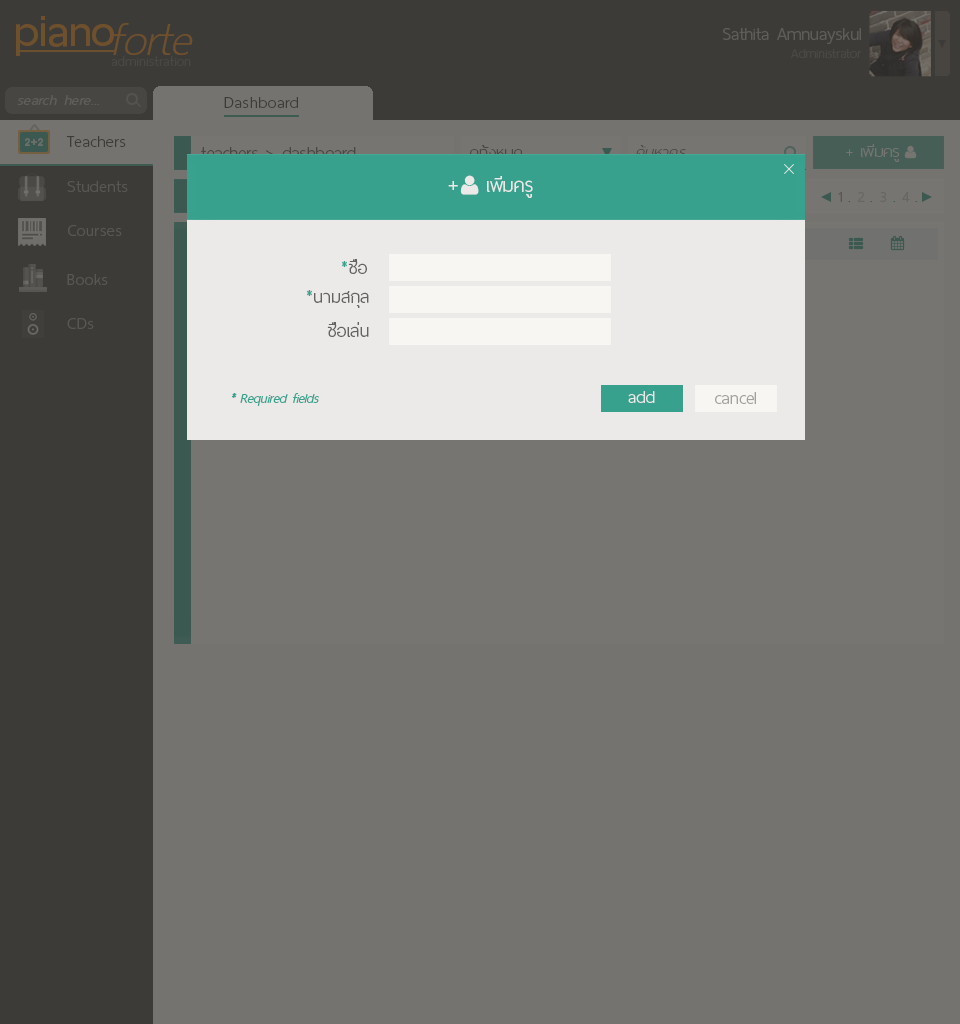
<style>
.page{position:relative;width:960px;height:1024px;background:#75736f}
.page>*{position:absolute;margin:0}
.t1{font:60px "ThaiSansNeue-SemiBold";letter-spacing:-0.005em;color:#6e502c}
.t2{font:62px "ThaiSansNeue-ExtraLightItalic";letter-spacing:-0.005em;color:#6e502c}
.t3{font:24px "ThaiSansNeue-Light";letter-spacing:-0.005em;color:#5f5d5a}
.t4{font:18px "ThaiSansNeue-Light";letter-spacing:-0.005em;color:#4a4843}
.t5{font:18.5px "ThaiSansNeue-ExtraLight";letter-spacing:0.025em;color:#4a4843}
.t6{font:20px "ThaiSansNeue-LightItalic";letter-spacing:0.025em;color:#605e5a}
.t7{font:22px "ThaiSansNeue-Light";letter-spacing:0.025em;color:#3d3b37}
.t8{font:24px "ThaiSansNeue-Light";letter-spacing:-0.005em}
.t9{font:22px "ThaiSansNeue-UltraLight";letter-spacing:0.01em}
.t10{font:22px "ThaiSansNeue-UltraLight";color:#777572}
.t11{font:22px "ThaiSansNeue-Light";letter-spacing:0.025em;color:#595754}
.t12{font:30px "ThaiSansNeue-Light";letter-spacing:-0.005em;color:#ebeae8}
.t13{font:26px "ThaiSansNeue-Light";letter-spacing:-0.005em;color:#ebeae8}
.t14{font:20px "ThaiSansNeue-Light";color:#686663}
.t15{font:24px "ThaiSansNeue-Light";color:#636363}
.t16{font:24px "ThaiSansNeue-Light";color:#37a18e}
.t17{font:18px "ThaiSansNeue-LightItalic";color:#37a18e}
.t18{font:24px "ThaiSansNeue-Light";letter-spacing:-0.005em;color:#ebeae8}
.t19{font:24px "ThaiSansNeue-Light";color:#a2a1a0}
</style>
<div class="page">
<p class="t1" style="left:16px;top:16px;width:98px;height:40px">piano</p>
<p class="t2" style="left:113px;top:23px;width:80px;height:32px">forte</p>
<p class="t3" style="left:723px;top:28px;width:138px;height:16px">Sathita Amnuayskul</p>
<p class="t4" style="left:791px;top:49px;width:71px;height:9px">Administrator</p>
<p class="t5" style="left:111px;top:56px;width:80px;height:10px">administration</p>
<p class="t6" style="left:17px;top:95px;width:83px;height:10px">search here...</p>
<p class="t7" style="left:224px;top:97px;width:74px;height:11px">Dashboard</p>
<p class="t7" style="left:66px;top:136px;width:60px;height:11px">Teachers</p>
<p class="t8" style="left:201px;top:147px;width:155px;height:12px">teachers &gt; dashboard</p>
<p class="t9" style="left:470px;top:145px;width:52px;height:18px">ดูทั้งหมด</p>
<p class="t10" style="left:846px;top:144px;width:53px;height:18px">+ เพิ่มครู</p>
<p class="t11" style="left:67px;top:181px;width:61px;height:11px">Students</p>
<p class="t12" style="left:448px;top:181px;width:10px;height:9px">+</p>
<p class="t13" style="left:487px;top:176px;width:46px;height:22px">เพิ่มครู</p>
<p class="t14" style="left:838px;top:192px;width:79px;height:10px">1 . 2 . 3 . 4 .</p>
<p class="t11" style="left:68px;top:225px;width:54px;height:11px">Courses</p>
<p class="t15" style="left:341px;top:259px;width:26px;height:15px"><span class="t16">*</span>ชื่อ</p>
<p class="t11" style="left:67px;top:274px;width:41px;height:11px">Books</p>
<p class="t15" style="left:306px;top:290px;width:63px;height:18px"><span class="t16">*</span>นามสกุล</p>
<p class="t11" style="left:67px;top:318px;width:27px;height:11px">CDs</p>
<p class="t15" style="left:327px;top:322px;width:42px;height:15px">ชื่อเล่น</p>
<p class="t17" style="left:231px;top:393px;width:88px;height:13px">* Required fields</p>
<p class="t18" style="left:628px;top:391px;width:27px;height:12px">add</p>
<p class="t19" style="left:715px;top:392px;width:41px;height:12px">cancel</p>
</div>
